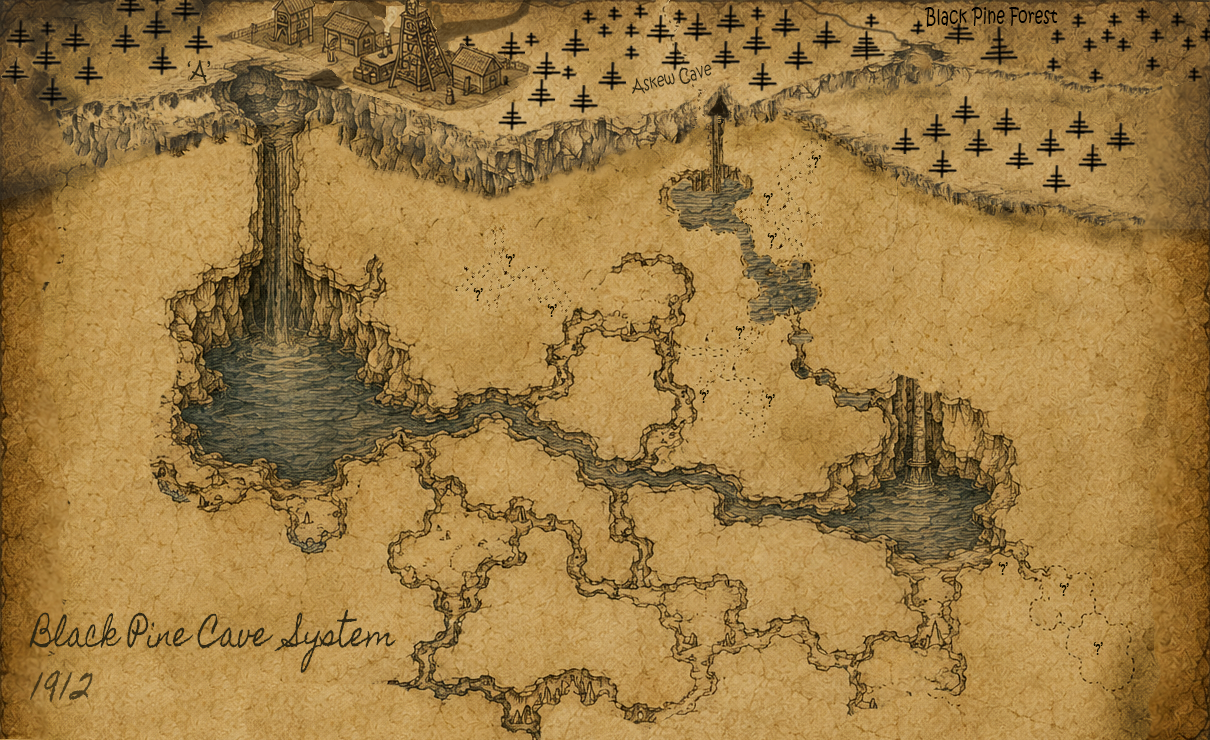
<style>
.page{position:relative;width:1210px;height:740px}
.page>*{position:absolute;margin:0}
.t1{font:20.6px "KristenITC-Regular";color:#000000;scale:0.75 1}
.t2{font:24px "KristenITC-Regular";color:#2f2814;scale:0.75 1}
.t3{font:18px "KristenITC-Regular";color:#2f2814;scale:0.75 1}
.t4{font:36px "HomemadeApple-Regular";color:#2f2814;scale:0.75 1}
.t5{font:48px "HomemadeApple-Regular";color:#4b3b1d;scale:0.75 1}
</style>
<div class="page">
<p class="t1" style="left:924px;top:7px;width:134px;height:20px">Black Pine Forest</p>
<p class="t2" style="left:187px;top:60px;width:24px;height:23px">‘A’</p>
<p class="t3" style="left:632px;top:64px;width:80px;height:30px;rotate:-12deg">Askew Cave</p>
<p class="t4" style="left:29px;top:609px;width:367px;height:64px">Black Pine Cave  System</p>
<p class="t5" style="left:30px;top:670px;width:63px;height:33px">1912</p>
</div>
